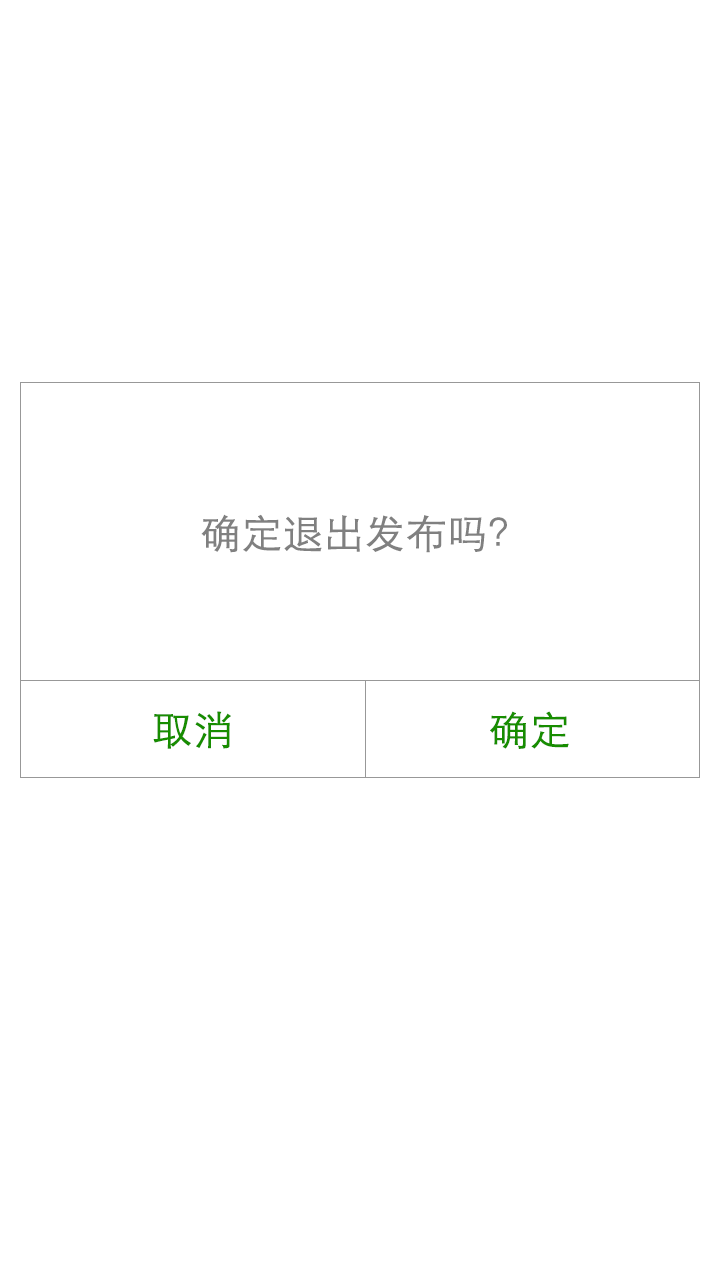
<style>
.page{position:relative;width:720px;height:1280px;background:#ffffff}
.page>*{position:absolute;margin:0}
.t1{font:40px "STXihei";color:#808080;font-weight:bold}
.t2{font:40px "STXihei";color:#178d00;font-weight:bold}
</style>
<div class="page">
<p class="t1" style="left:201px;top:514px;width:306px;height:39px">确定退出发布吗？</p>
<p class="t2" style="left:153px;top:711px;width:78px;height:38px">取消</p>
<p class="t2" style="left:490px;top:711px;width:79px;height:38px">确定</p>
</div>
